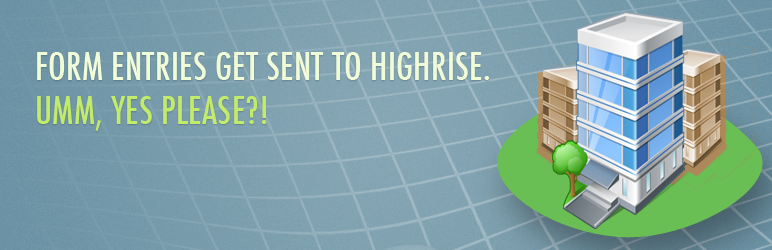
<style>
.page{position:relative;width:772px;height:250px}
.page>*{position:absolute;margin:0}
.t1{font:36.7px "Futura-CondensedMedium";letter-spacing:0.01em;color:#f0fbd8;text-transform:uppercase}
.t2{font:36.7px "Futura-CondensedMedium";letter-spacing:0.01em;color:#c2eb6c;text-transform:uppercase}
</style>
<div class="page">
<p class="t1" style="left:37px;top:52px;width:453px;height:79px">Form Entries get sent to highrise.<br><span class="t2">Umm, yes please?!</span></p>
</div>
